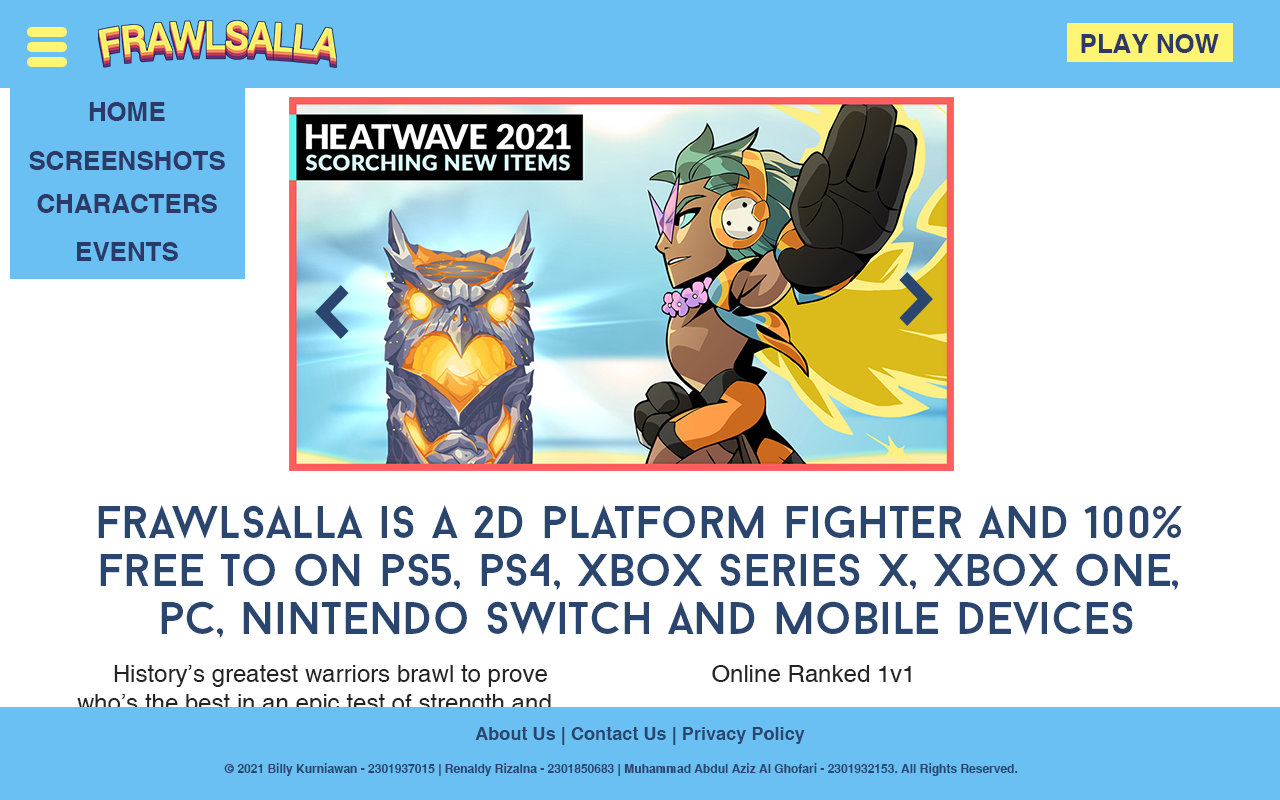
<style>
.page{position:relative;width:1280px;height:800px;background:#ffffff}
.page>*{position:absolute;margin:0}
.t1{font:25.9px "Helvetica-Bold";color:#2d3a67}
.t2{font:116.8px "BaronNeue";color:#2a456e}
.t3{font:45.7px/48px "BaronNeue";color:#2a456e}
.t4{font:18.1px "Helvetica-Bold";color:#2a456e}
.t5{font:12px "Helvetica-Bold";color:#2a456e}
</style>
<div class="page">
<p class="t1" style="left:1081px;top:34px;width:138px;height:19px">PLAY NOW</p>
<p class="t1" style="left:89px;top:102px;width:76px;height:19px">HOME</p>
<p class="t1" style="left:29px;top:151px;width:196px;height:19px">SCREENSHOTS</p>
<p class="t1" style="left:37px;top:194px;width:180px;height:19px">CHARACTERS</p>
<p class="t1" style="left:77px;top:242px;width:101px;height:19px">EVENTS</p>
<p class="t2" style="left:899px;top:272px;width:34px;height:54px">&gt;</p>
<p class="t2" style="left:315px;top:285px;width:34px;height:54px;rotate:180deg">&gt;</p>
<p class="t3" style="left:98px;top:505px;width:1084px;height:133px;text-align:center">Frawlsalla is a 2D platform fighter and 100% <br>Free to on ps5, ps4, Xbox Series X, Xbox one, <br>pC, Nintendo Switch and Mobile devices</p>
<p class="t4" style="left:475px;top:727px;width:330px;height:18px">About Us | Contact Us | Privacy Policy</p>
<p class="t5" style="left:224px;top:763px;width:794px;height:13px">© 2021 Billy Kurniawan - 2301937015 | Renaldy Rizalna - 2301850683 | Muhammad Abdul Aziz Al Ghofari - 2301932153. All Rights Reserved.</p>
</div>
